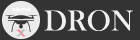
<style>
.page{position:relative;width:140px;height:40px;background:#333333}
.page>*{position:absolute;margin:0}
.t1{font:30px "BaskOldFace";color:#f0f0f0}
</style>
<div class="page">
<p class="t1" style="left:44px;top:9px;width:89px;height:22px">DRON</p>
</div>
